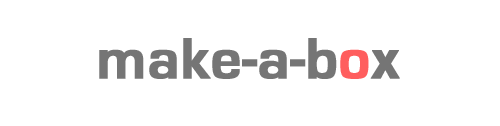
<style>
.page{position:relative;width:500px;height:126px;background:#ffffff}
.page>*{position:absolute;margin:0}
.t1{font:60px "EurostileBold";color:#757575;font-weight:bold}
.t2{font:60px "EurostileBold";color:#ff5e5e;font-weight:bold}
</style>
<div class="page">
<p class="t1" style="left:99px;top:38px;width:301px;height:41px">make-a-b<span class="t2">o</span>x</p>
</div>
